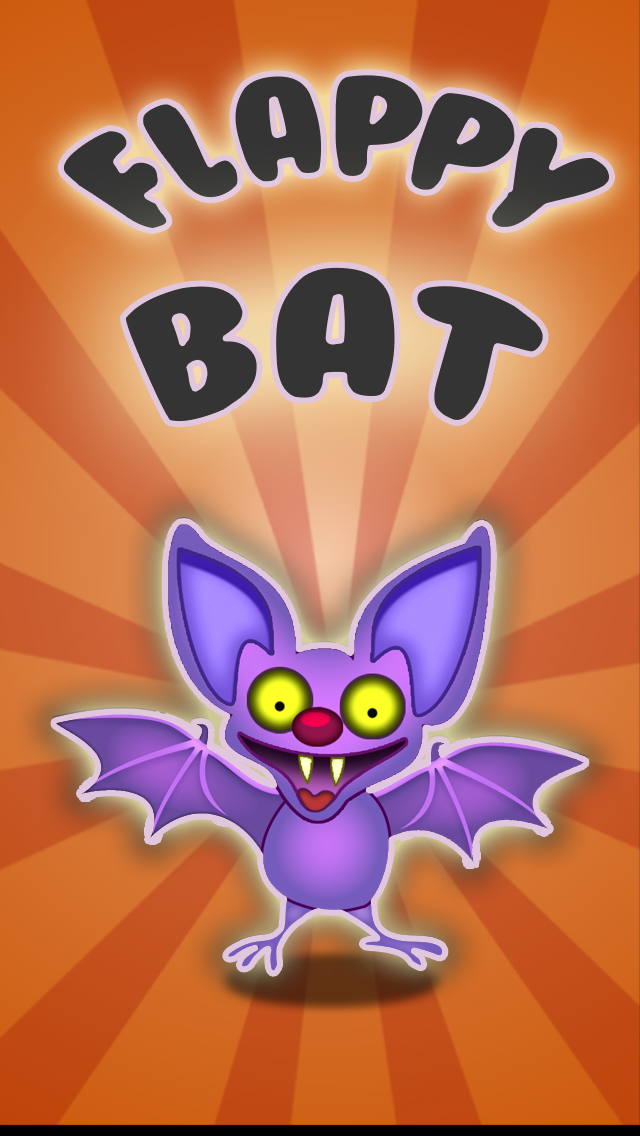
<style>
.page{position:relative;width:640px;height:1136px}
.page>*{position:absolute;margin:0}
.t1{font:120px "BubbleGum";color:#343434}
.t2{font:174.1px "BubbleGum";color:#343434}
</style>
<div class="page">
<p class="t1" style="left:60px;top:72px;width:553px;height:160px;rotate:1deg">Flappy</p>
<p class="t2" style="left:122px;top:264px;width:424px;height:161px;rotate:1deg">Bat</p>
</div>
